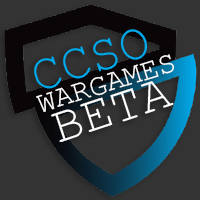
<style>
.page{position:relative;width:200px;height:200px;background:#333333}
.page>*{position:absolute;margin:0}
.t1{font:50.8px "CourierNewPSMT";color:#00a9ea}
.t2{font:29.9px "CourierNewPSMT";color:#ffffff}
.t3{font:50.8px "CourierNewPSMT";color:#ffffff}
</style>
<div class="page">
<p class="t1" style="left:34px;top:29px;width:114px;height:60px;rotate:-18deg">CCSO</p>
<p class="t2" style="left:36px;top:54px;width:139px;height:58px;rotate:-17deg">WARGAMES</p>
<p class="t3" style="left:51px;top:81px;width:123px;height:61px;rotate:-18deg">BETA</p>
</div>
